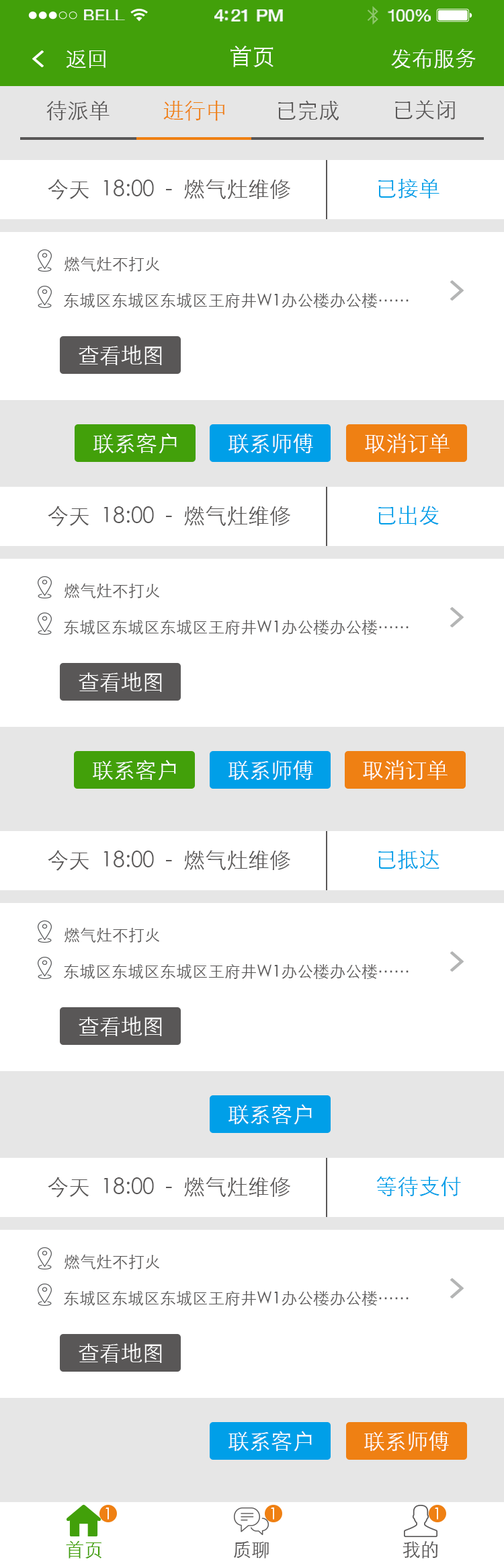
<style>
.page{position:relative;width:504px;height:1568px;background:#ffffff}
.page>*{position:absolute;margin:0}
.t1{font:15.6px "HelveticaNeue";letter-spacing:0.02em;color:#ffffff;scale:1.06 1}
.t2{font:17px "HelveticaNeue-Medium";letter-spacing:-0.02em;color:#ffffff;scale:1.06 1}
.t3{font:16.3px "HelveticaNeue";letter-spacing:-0.02em;color:#ffffff;scale:1.06 1}
.t4{font:21.5px "STXihei";color:#ffffff}
.t5{font:22.9px "STXihei";color:#ffffff}
.t6{font:21.5px "STXihei";color:#595757}
.t7{font:21.5px "STXihei";color:#ef8013}
.t8{font:21.5px "STXihei";color:#009fe8}
.t9{font:16.1px "STXihei";color:#595757}
.t10{font:16.1px "STXihei";color:#ffffff}
.t11{font:18.8px "STXihei";color:#42a00a}
.t12{font:18.8px "STXihei";color:#595757}
</style>
<div class="page">
<p class="t1" style="left:84px;top:9px;width:41px;height:11px">BELL</p>
<p class="t2" style="left:214px;top:9px;width:69px;height:13px">4:21 PM</p>
<p class="t3" style="left:388px;top:9px;width:43px;height:13px">100%</p>
<p class="t4" style="left:66px;top:50px;width:40px;height:18px">返回</p>
<p class="t5" style="left:231px;top:46px;width:43px;height:21px">首页</p>
<p class="t4" style="left:391px;top:48px;width:85px;height:21px">发布服务</p>
<p class="t6" style="left:46px;top:101px;width:64px;height:19px">待派单</p>
<p class="t7" style="left:163px;top:100px;width:62px;height:21px">进行中</p>
<p class="t6" style="left:278px;top:100px;width:62px;height:20px">已完成</p>
<p class="t6" style="left:395px;top:100px;width:60px;height:20px">已关闭</p>
<p class="t6" style="left:48px;top:179px;width:242px;height:21px">今天  18:00  -  燃气灶维修</p>
<p class="t8" style="left:379px;top:179px;width:61px;height:19px">已接单</p>
<p class="t9" style="left:65px;top:256px;width:94px;height:16px">燃气灶不打火</p>
<p class="t9" style="left:64px;top:292px;width:345px;height:16px">东城区东城区东城区王府井W1办公楼办公楼……</p>
<p class="t4" style="left:79px;top:345px;width:83px;height:21px">查看地图</p>
<p class="t4" style="left:93px;top:433px;width:84px;height:21px">联系客户</p>
<p class="t4" style="left:229px;top:434px;width:84px;height:19px">联系师傅</p>
<p class="t4" style="left:365px;top:433px;width:85px;height:20px">取消订单</p>
<p class="t6" style="left:48px;top:506px;width:242px;height:20px">今天  18:00  -  燃气灶维修</p>
<p class="t8" style="left:379px;top:506px;width:60px;height:19px">已出发</p>
<p class="t9" style="left:65px;top:583px;width:94px;height:15px">燃气灶不打火</p>
<p class="t9" style="left:64px;top:619px;width:345px;height:16px">东城区东城区东城区王府井W1办公楼办公楼……</p>
<p class="t4" style="left:79px;top:672px;width:83px;height:21px">查看地图</p>
<p class="t4" style="left:93px;top:760px;width:83px;height:21px">联系客户</p>
<p class="t4" style="left:229px;top:760px;width:84px;height:20px">联系师傅</p>
<p class="t4" style="left:363px;top:760px;width:85px;height:20px">取消订单</p>
<p class="t6" style="left:48px;top:850px;width:242px;height:21px">今天  18:00  -  燃气灶维修</p>
<p class="t8" style="left:379px;top:850px;width:61px;height:19px">已抵达</p>
<p class="t9" style="left:65px;top:927px;width:94px;height:16px">燃气灶不打火</p>
<p class="t9" style="left:64px;top:964px;width:345px;height:15px">东城区东城区东城区王府井W1办公楼办公楼……</p>
<p class="t4" style="left:79px;top:1016px;width:83px;height:21px">查看地图</p>
<p class="t4" style="left:229px;top:1104px;width:83px;height:21px">联系客户</p>
<p class="t6" style="left:48px;top:1177px;width:242px;height:21px">今天  18:00  -  燃气灶维修</p>
<p class="t8" style="left:377px;top:1176px;width:84px;height:20px">等待支付</p>
<p class="t9" style="left:65px;top:1254px;width:94px;height:15px">燃气灶不打火</p>
<p class="t9" style="left:64px;top:1290px;width:345px;height:16px">东城区东城区东城区王府井W1办公楼办公楼……</p>
<p class="t4" style="left:79px;top:1343px;width:83px;height:21px">查看地图</p>
<p class="t4" style="left:229px;top:1431px;width:83px;height:21px">联系客户</p>
<p class="t4" style="left:364px;top:1432px;width:85px;height:19px">联系师傅</p>
<p class="t10" style="left:106px;top:1507px;width:3px;height:13px">1</p>
<p class="t10" style="left:271px;top:1507px;width:3px;height:13px">1</p>
<p class="t10" style="left:435px;top:1507px;width:3px;height:13px">1</p>
<p class="t11" style="left:66px;top:1540px;width:36px;height:19px">首页</p>
<p class="t12" style="left:234px;top:1541px;width:35px;height:18px">质聊</p>
<p class="t12" style="left:403px;top:1541px;width:35px;height:18px">我的</p>
</div>
